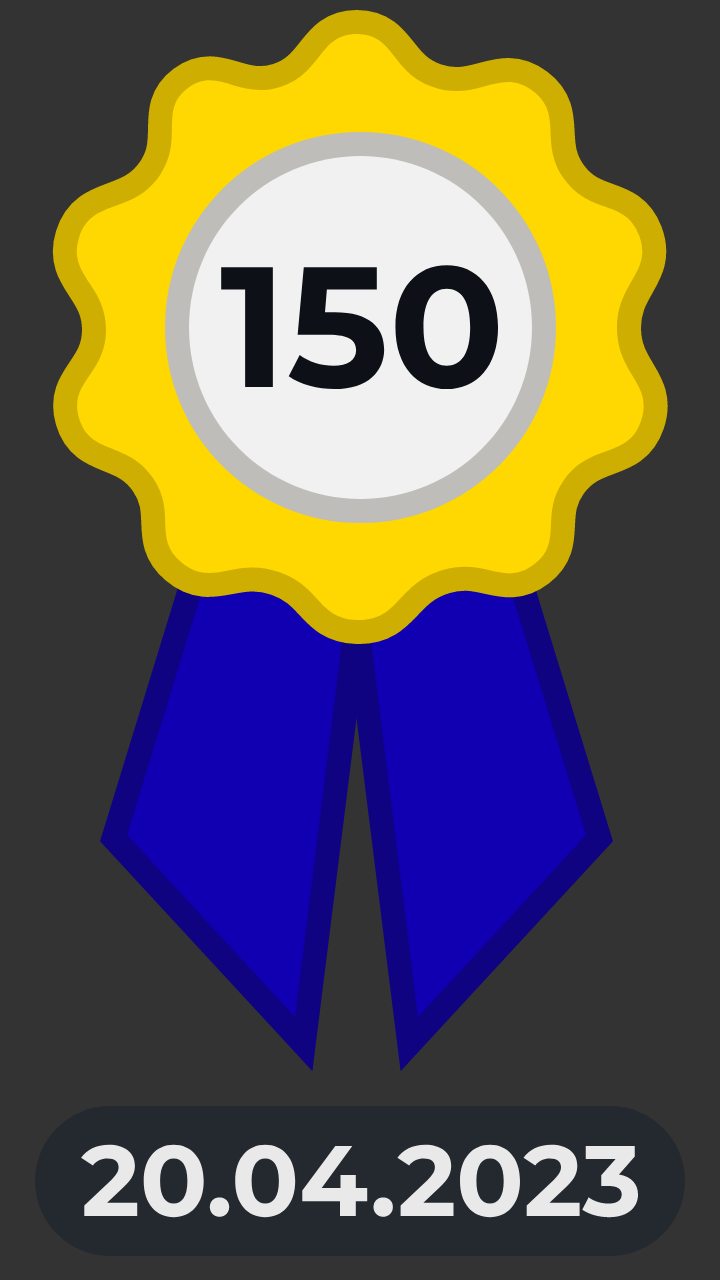
<style>
.page{position:relative;width:720px;height:1280px;background:#333333}
.page>*{position:absolute;margin:0}
.t1{font:171px "Montserrat-Bold";color:#0d1117}
.t2{font:100px "Montserrat-Bold";color:#e9e9e9}
</style>
<div class="page">
<p class="t1" style="left:221px;top:265px;width:278px;height:125px">150</p>
<p class="t2" style="left:81px;top:1144px;width:557px;height:74px">20.04.2023</p>
</div>
